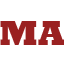
<style>
.page{position:relative;width:64px;height:64px;background:#ffffff}
.page>*{position:absolute;margin:0}
.t1{font:35px "Rockwell-ExtraBold";color:#9a2121}
</style>
<div class="page">
<p class="t1" style="left:0px;top:21px;width:65px;height:24px">MA</p>
</div>
